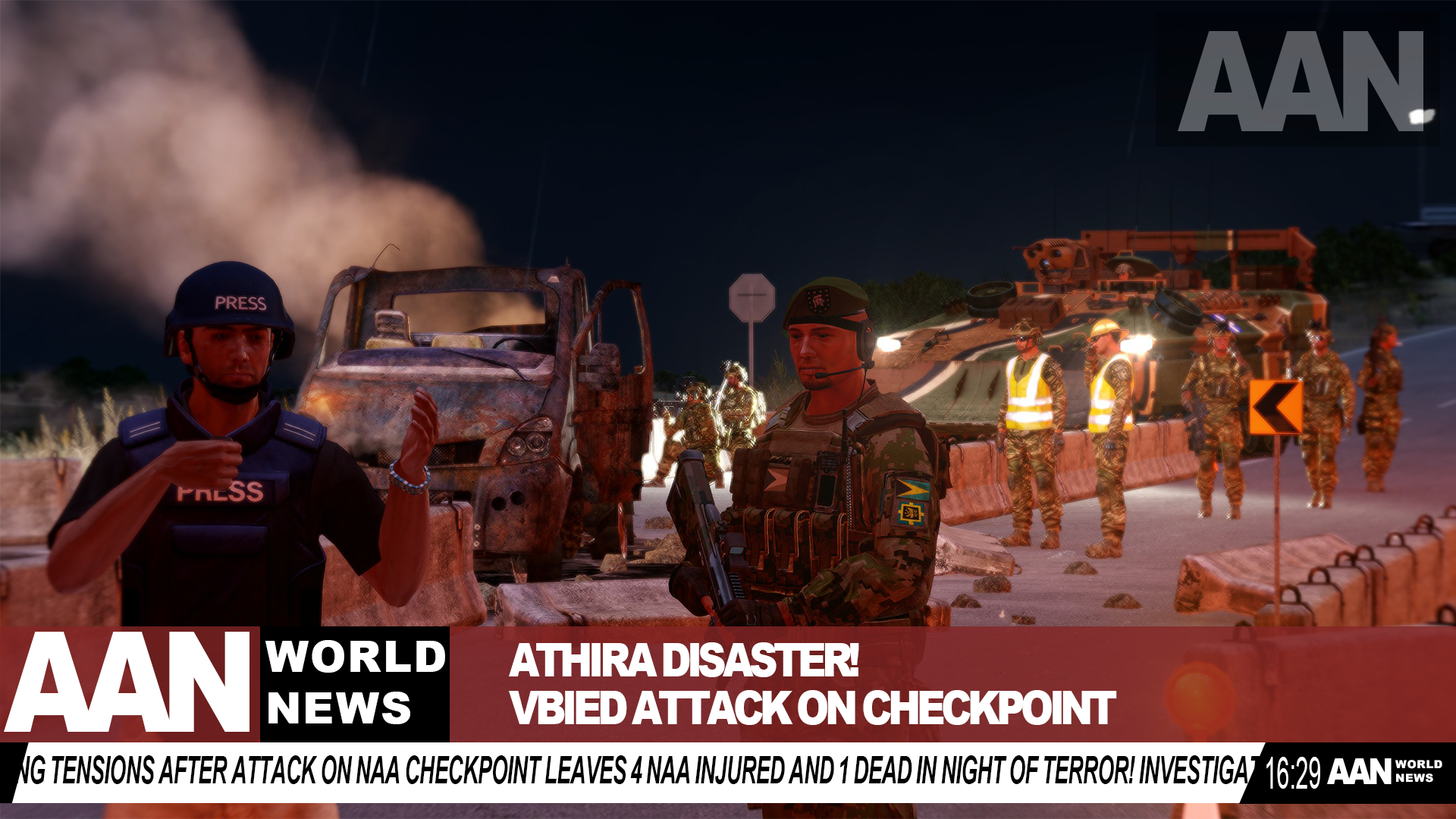
<style>
.page{position:relative;width:1456px;height:819px}
.page>*{position:absolute;margin:0}
.t1{font:140.1px "Arial-Black";letter-spacing:-0.14em;color:#575b61;text-transform:uppercase;scale:0.83 1}
.t2{font:140.1px "Arial-Black";letter-spacing:-0.14em;color:#ffffff;text-transform:uppercase;scale:0.83 1}
.t3{font:43.2px "Arial-Black";color:#ffffff;text-transform:uppercase}
.t4{font:47.3px "Arial-Black";letter-spacing:-0.14em;color:#ffffff;text-transform:uppercase;scale:0.83 1}
.t5{font:37.8px "Arial-BoldItalicMT";letter-spacing:-0.06em;color:#000000;text-transform:uppercase;scale:0.56 1}
.t6{font:45.5px "ArialMT";color:#ffffff;text-transform:uppercase;scale:0.5 1}
.t7{font:36.2px "Arial-Black";letter-spacing:-0.14em;color:#ffffff;text-transform:uppercase;scale:0.84 1}
.t8{font:11.2px "Arial-Black";color:#ffffff;text-transform:uppercase}
</style>
<div class="page">
<p class="t1" style="left:1178px;top:31px;width:245px;height:100px">AAN</p>
<p class="t2" style="left:4px;top:632px;width:245px;height:100px">AAN</p>
<p class="t3" style="left:265px;top:640px;width:180px;height:84px">WORLD<br>NEWS</p>
<p class="t4" style="left:509px;top:642px;width:608px;height:83px">Athira Disaster! <br>VBIED ATTACK ON CHECKPOINT</p>
<p class="t5" style="left:14px;top:755px;width:1358px;height:29px">ng tensions after Attack on NAA Checkpoint LEAVES 4 NAA INJURED AND 1 DEAD IN NIGHT OF TERROR! Investigations still</p>
<p class="t6" style="left:1266px;top:757px;width:54px;height:32px">16:29</p>
<p class="t7" style="left:1327px;top:758px;width:65px;height:26px">AAN</p>
<p class="t8" style="left:1395px;top:760px;width:47px;height:23px">WORLD<br>NEWS</p>
</div>
